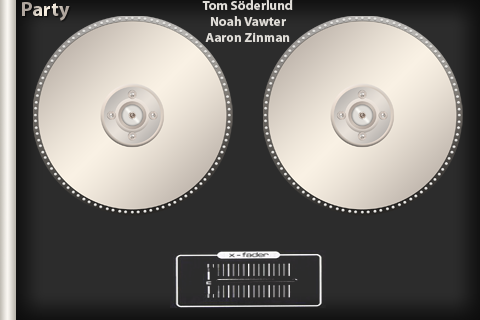
<style>
.page{position:relative;width:480px;height:320px;background:#2c2c2c}
.page>*{position:absolute;margin:0}
.t1{font:20.5px "MyriadPro-Bold"}
.t2{font:13.3px "MyriadPro-Bold";color:#dfdcd7}
</style>
<div class="page">
<p class="t1" style="left:22px;top:2px;width:48px;height:19px">Party</p>
<p class="t2" style="left:202px;top:0px;width:91px;height:42px;text-align:center">Tom Söderlund<br>Noah Vawter<br>Aaron Zinman</p>
</div>
